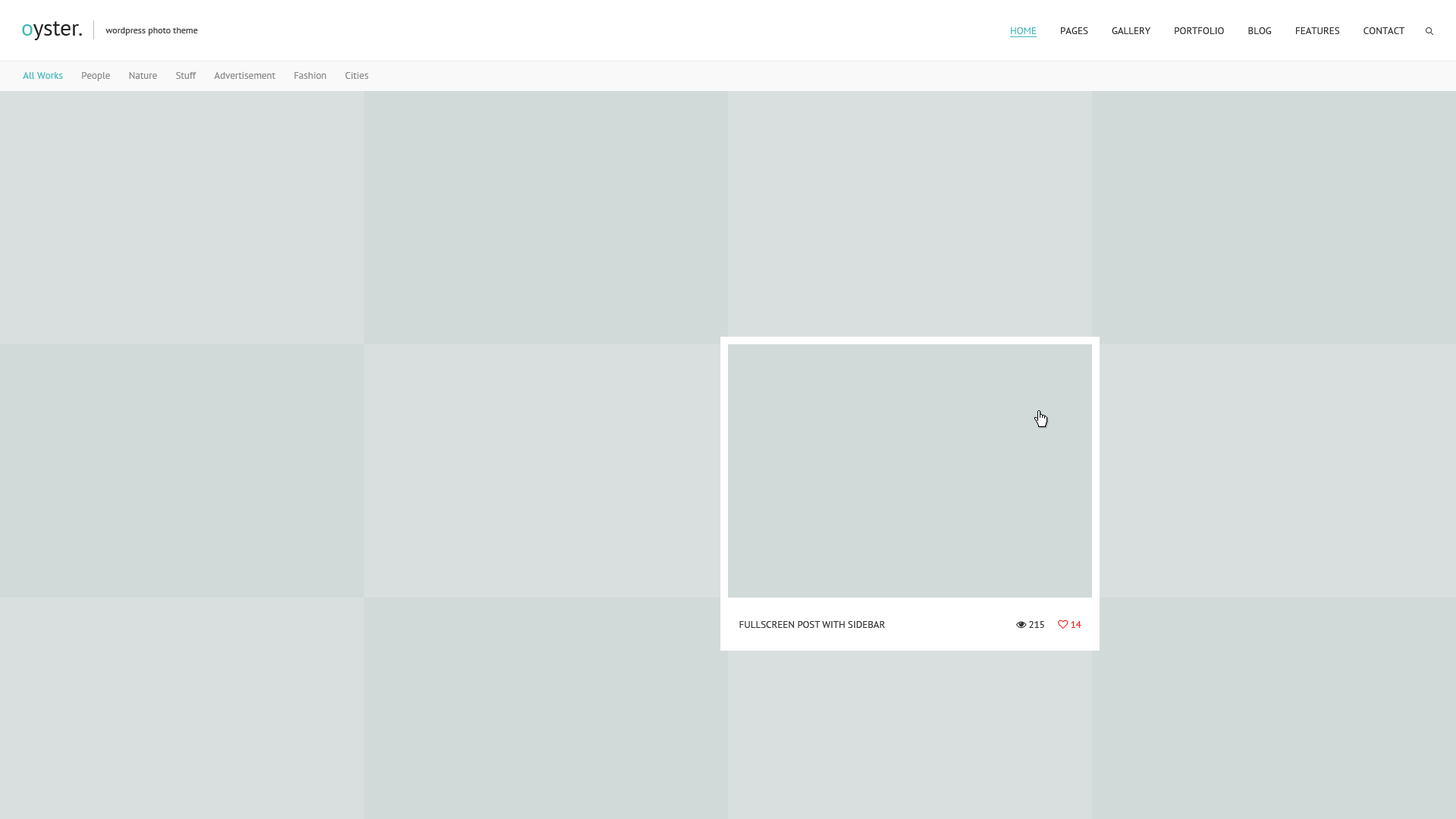
<style>
.page{position:relative;width:1456px;height:819px;background:#d1d9d9}
.page>*{position:absolute;margin:0}
.t1{font:9.1px "PTSans-Regular";color:#434343}
.t2{font:9.9px "PTSans-Regular";color:#343434;text-transform:uppercase}
.t3{font:9.9px "PTSans-Regular";color:#40b7b8;text-transform:uppercase}
.t4{font:9.9px "PTSans-Regular";color:#898888}
.t5{font:9.9px "PTSans-Regular";color:#40b7b8}
</style>
<div class="page">
<p class="t1" style="left:105px;top:27px;width:93px;height:9px">wordpress photo theme</p>
<p class="t2" style="left:1011px;top:27px;width:394px;height:7px"><span class="t3">Home </span>        Pages         Gallery         Portfolio         Blog         Features         Contact</p>
<p class="t4" style="left:23px;top:72px;width:346px;height:9px"><span class="t5">All Works      </span> People       Nature       Stuff       Advertisement       Fashion       Cities</p>
<p class="t2" style="left:739px;top:621px;width:146px;height:7px">Fullscreen Post with Sidebar</p>
</div>
